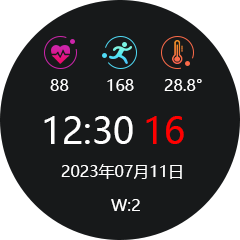
<style>
.page{position:relative;width:240px;height:240px;background:#17191a}
.page>*{position:absolute;margin:0}
.t1{font:16px "MicrosoftYaHei";color:#ffffff;font-variant:small-caps}
.t2{font:36px "MicrosoftYaHei";color:#ffffff;font-variant:small-caps}
.t3{font:36px "MicrosoftYaHei";color:#ff0000;font-variant:small-caps}
</style>
<div class="page">
<p class="t1" style="left:50px;top:79px;width:19px;height:12px">88</p>
<p class="t1" style="left:107px;top:79px;width:27px;height:12px">168</p>
<p class="t1" style="left:164px;top:79px;width:38px;height:12px">28.8°</p>
<p class="t2" style="left:44px;top:116px;width:89px;height:28px">12:30</p>
<p class="t3" style="left:146px;top:116px;width:38px;height:28px">16</p>
<p class="t1" style="left:61px;top:164px;width:121px;height:15px">2023年07月11日</p>
<p class="t1" style="left:111px;top:199px;width:29px;height:12px">W:2</p>
</div>
